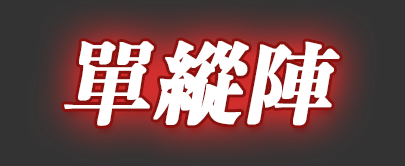
<style>
.page{position:relative;width:405px;height:166px}
.page>*{position:absolute;margin:0}
.t1{font:90px "RyuminPr6N-ExBold";letter-spacing:-0.025em;color:#ffffff;font-weight:bold;font-style:italic}
</style>
<div class="page">
<p class="t1" style="left:64px;top:40px;width:276px;height:86px">單縱陣</p>
</div>
